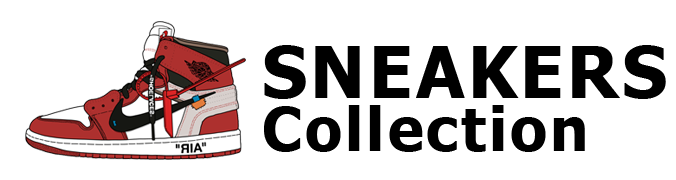
<style>
.page{position:relative;width:676px;height:180px;background:#ffffff}
.page>*{position:absolute;margin:0}
.t1{font:70.8px "Tahoma-Bold";letter-spacing:0.05em;color:#000000}
.t2{font:60.1px "Tahoma-Bold";letter-spacing:0.05em;color:#000000}
</style>
<div class="page">
<p class="t1" style="left:264px;top:45px;width:402px;height:54px">SNEAKERS</p>
<p class="t2" style="left:264px;top:105px;width:321px;height:47px">Collection</p>
</div>
